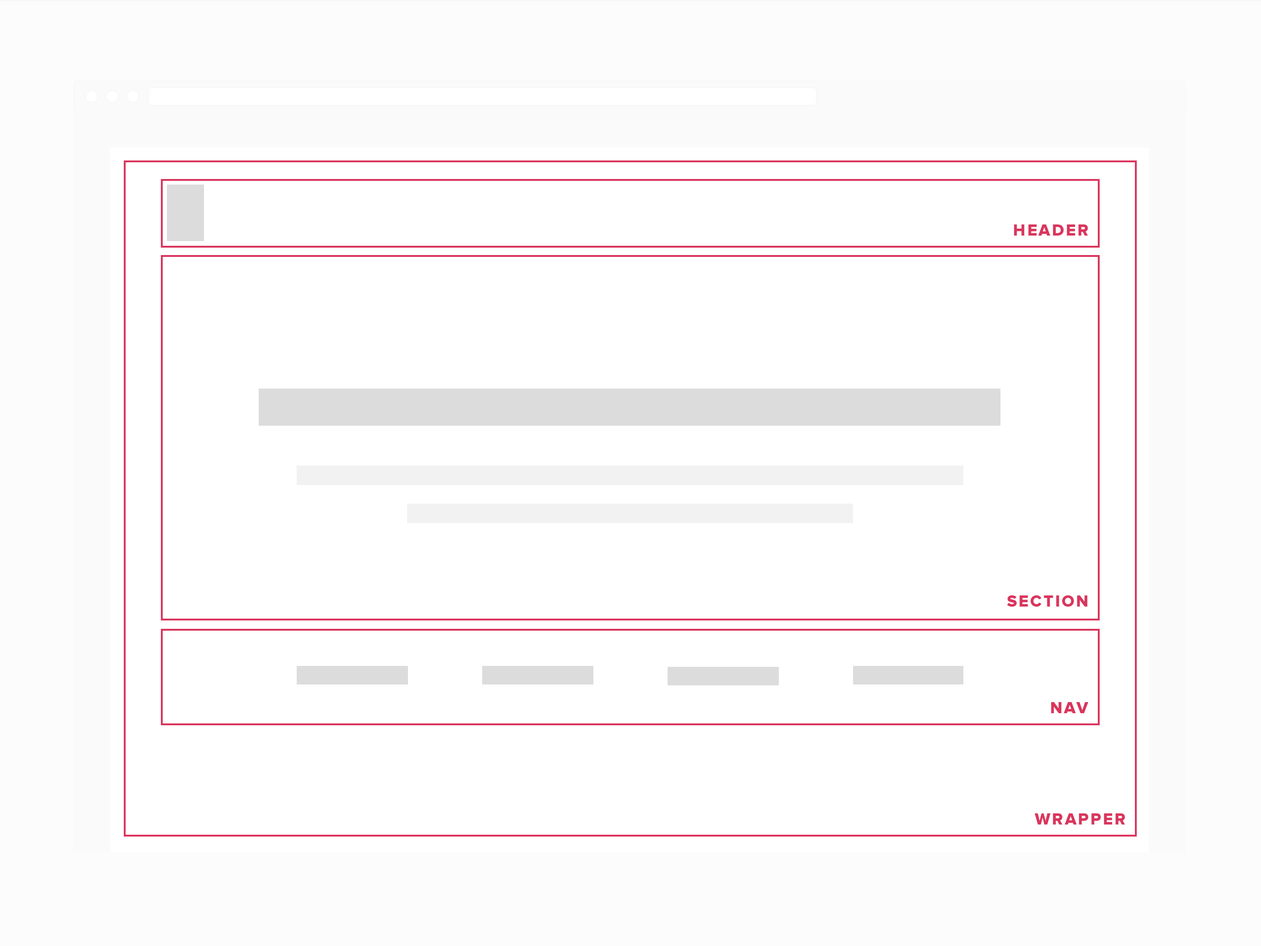
<style>
.page{position:relative;width:1261px;height:946px;background:#ffffff}
.page>*{position:absolute;margin:0}
.t1{font:16.7px "ProximaNova-Extrabld";letter-spacing:0.1em;color:#da355d}
</style>
<div class="page">
<p class="t1" style="left:1014px;top:224px;width:74px;height:11px">HEADER</p>
<p class="t1" style="left:1007px;top:595px;width:81px;height:12px">SECTION</p>
<p class="t1" style="left:1051px;top:702px;width:37px;height:11px">NAV</p>
<p class="t1" style="left:1034px;top:813px;width:91px;height:11px">WRAPPER</p>
</div>
